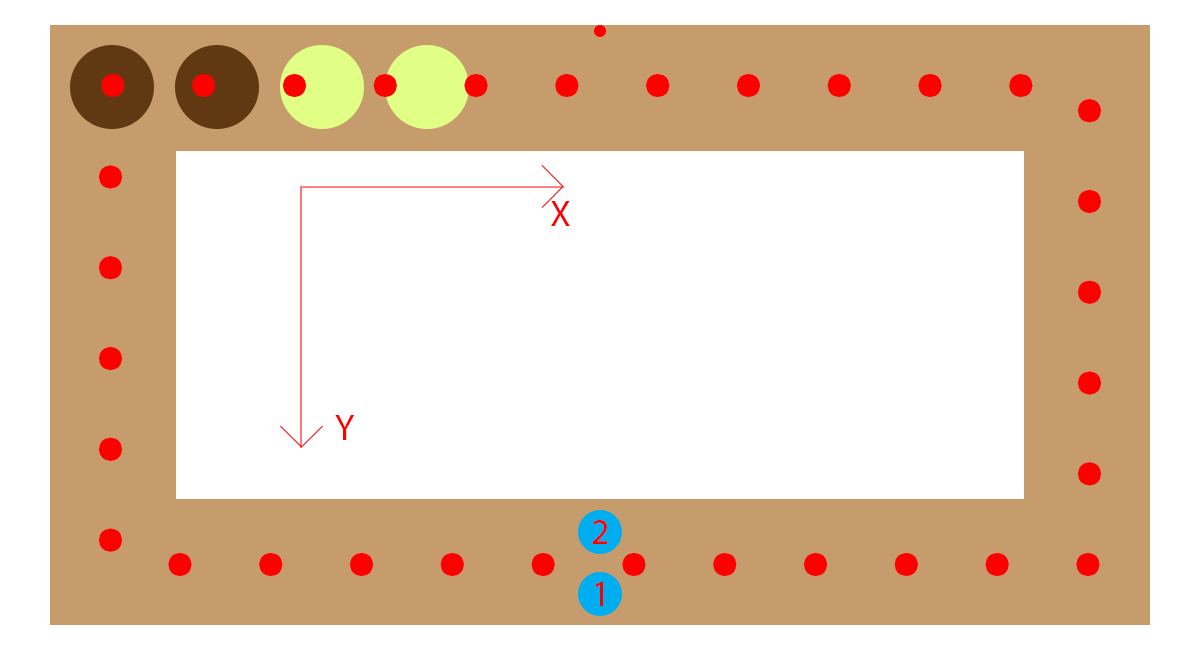
<style>
.page{position:relative;width:1200px;height:650px;background:#ffffff}
.page>*{position:absolute;margin:0}
.t1{font:36px "MyriadPro-Regular";color:#ff0000}
</style>
<div class="page">
<p class="t1" style="left:551px;top:201px;width:19px;height:25px">X</p>
<p class="t1" style="left:335px;top:415px;width:20px;height:25px">Y</p>
<p class="t1" style="left:592px;top:520px;width:16px;height:24px">2</p>
<p class="t1" style="left:595px;top:582px;width:8px;height:24px">1</p>
</div>
